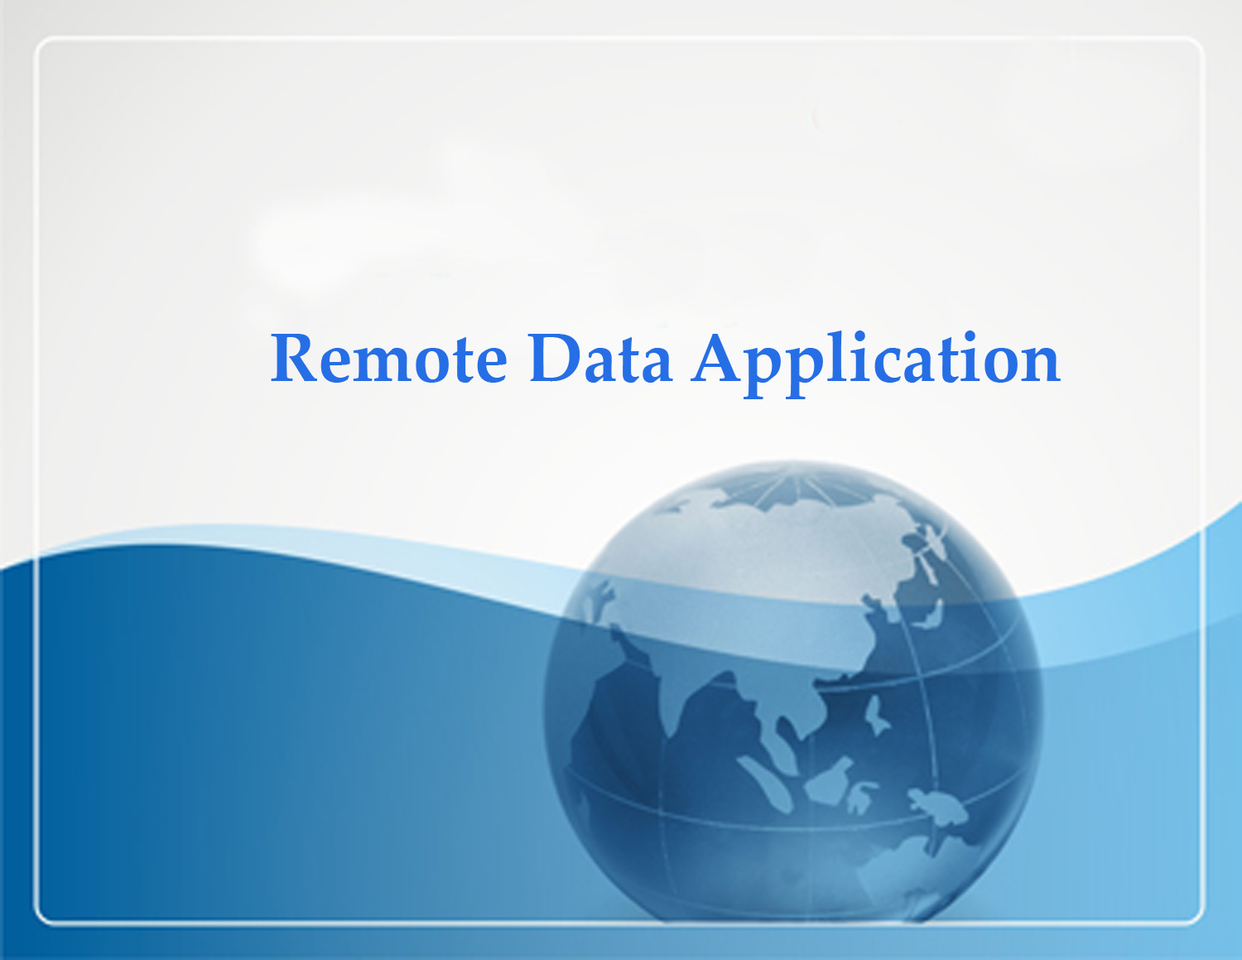
<style>
.page{position:relative;width:1242px;height:960px}
.page>*{position:absolute;margin:0}
.t1{font:68.6px "PalatinoLinotype-Bold";color:#266ee5}
</style>
<div class="page">
<p class="t1" style="left:271px;top:330px;width:790px;height:69px">Remote Data Application</p>
</div>
